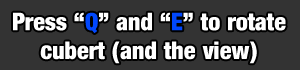
<style>
.page{position:relative;width:300px;height:70px;background:#333333}
.page>*{position:absolute;margin:0}
.t1{font:24px "Harvest";color:#ffffff}
.t2{font:24px "Harvest";color:#0148fe}
</style>
<div class="page">
<p class="t1" style="left:13px;top:12px;width:273px;height:52px;text-align:center">Press “<span class="t2">Q</span>” and “<span class="t2">E</span>” to rotate<br>cubert (and the view)</p>
</div>
